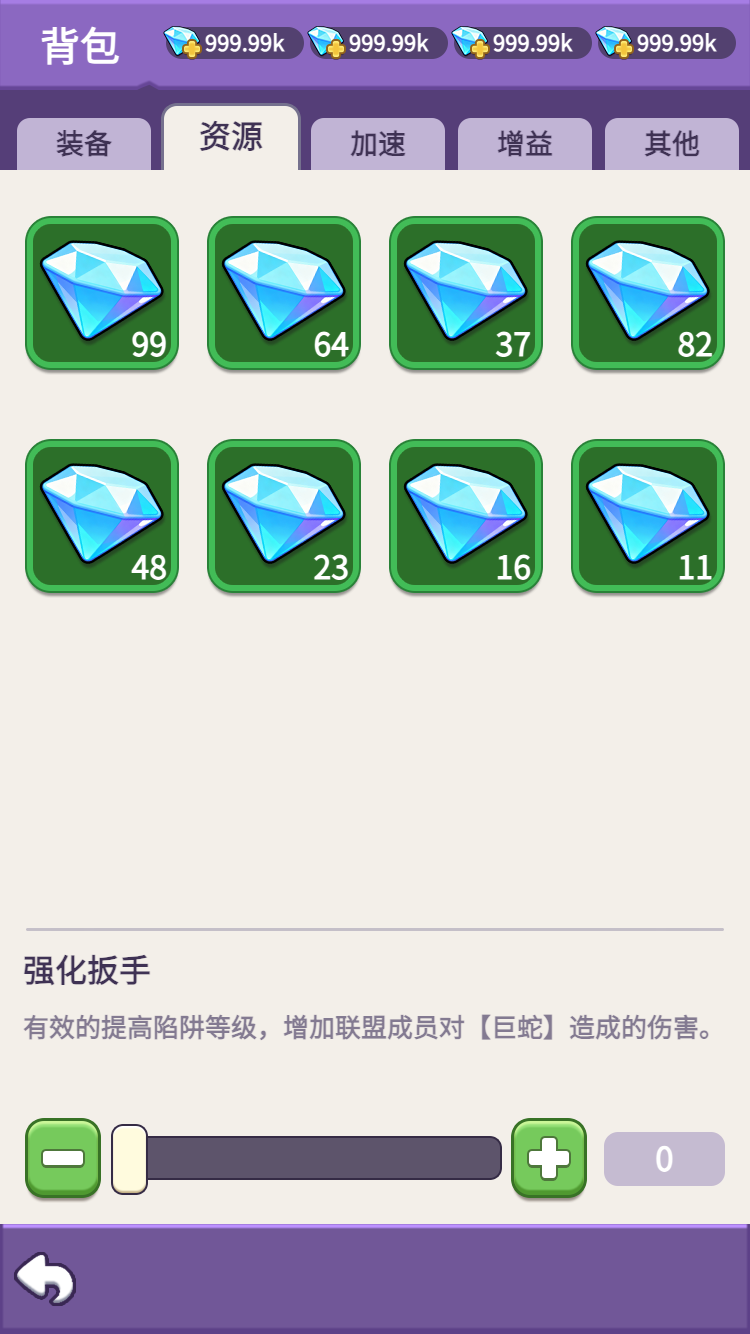
<style>
.page{position:relative;width:750px;height:1334px;background:#f3efe9}
.page>*{position:absolute;margin:0}
.t1{font:40px "WebPSD-18463539-0-Regular";color:#ffffff;font-weight:bold}
.t2{font:32px/32px "WebPSD-18463539-0-Regular";color:#3f3254;font-weight:bold}
.t3{font:28px/28px "WebPSD-18463539-0-Regular";color:#3f3254;font-weight:bold}
.t4{font:32px "WebPSD-18463539-0-Regular";color:#ffffff;font-weight:bold}
.t5{font:32px "WebPSD-18463539-0-Regular";color:#3f3254;font-weight:bold}
.t6{font:26px/26px "WebPSD-18463539-0-Regular";color:#837a91;font-weight:bold}
</style>
<div class="page">
<p class="t1" style="left:38px;top:16px;width:118px;height:60px">背包</p>
<p class="t2" style="left:161px;top:103px;width:140px;height:67px;text-align:center">资源</p>
<p class="t3" style="left:311px;top:118px;width:134px;height:52px;text-align:center">加速</p>
<p class="t3" style="left:458px;top:118px;width:134px;height:52px;text-align:center">增益</p>
<p class="t3" style="left:605px;top:118px;width:134px;height:52px;text-align:center">其他</p>
<p class="t4" style="left:294px;top:323px;width:57px;height:42px">64</p>
<p class="t4" style="left:476px;top:323px;width:57px;height:42px">37</p>
<p class="t4" style="left:658px;top:323px;width:57px;height:42px">82</p>
<p class="t4" style="left:112px;top:546px;width:57px;height:42px">48</p>
<p class="t4" style="left:294px;top:546px;width:57px;height:42px">23</p>
<p class="t4" style="left:476px;top:546px;width:57px;height:42px">16</p>
<p class="t4" style="left:658px;top:546px;width:57px;height:42px">11</p>
<p class="t5" style="left:23px;top:946px;width:704px;height:48px">强化扳手</p>
<p class="t6" style="left:23px;top:998px;width:704px;height:58px">有效的提高陷阱等级，增加联盟成员对【巨蛇】造成的伤害。</p>
</div>
